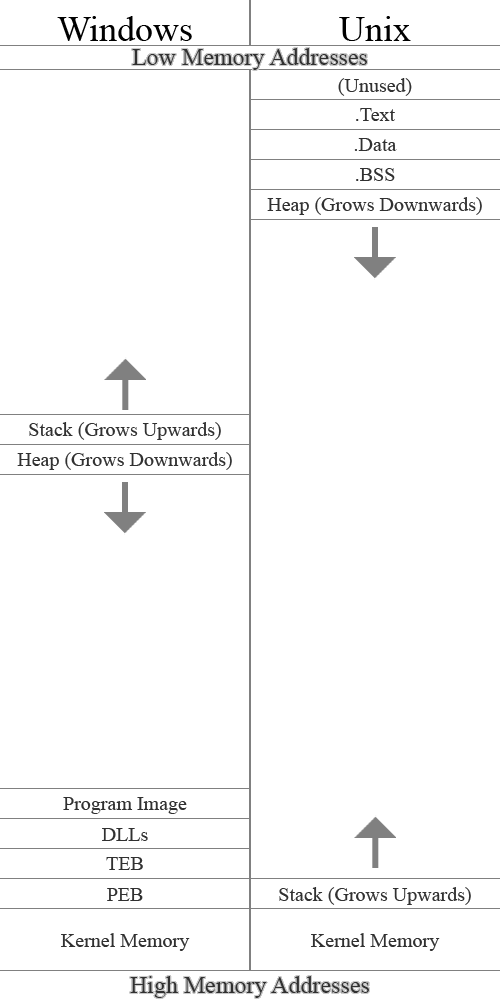
<style>
.page{position:relative;width:500px;height:1000px;background:#ffffff}
.page>*{position:absolute;margin:0}
.t1{font:36px "TimesNewRomanPSMT";color:#000000}
.t2{font:24px "TimesNewRomanPSMT";color:#313131}
.t3{font:20px "TimesNewRomanPSMT";color:#313131}
</style>
<div class="page">
<p class="t1" style="left:57px;top:16px;width:135px;height:25px">Windows</p>
<p class="t1" style="left:339px;top:16px;width:72px;height:25px">Unix</p>
<p class="t2" style="left:132px;top:48px;width:235px;height:22px">Low Memory Addresses</p>
<p class="t3" style="left:338px;top:78px;width:74px;height:18px">(Unused)</p>
<p class="t3" style="left:356px;top:108px;width:39px;height:13px">.Text</p>
<p class="t3" style="left:354px;top:138px;width:43px;height:13px">.Data</p>
<p class="t3" style="left:356px;top:168px;width:39px;height:13px">.BSS</p>
<p class="t3" style="left:267px;top:197px;width:215px;height:18px">Heap (Grows Downwards)</p>
<p class="t3" style="left:29px;top:422px;width:192px;height:18px">Stack (Grows Upwards)</p>
<p class="t3" style="left:17px;top:452px;width:215px;height:18px">Heap (Grows Downwards)</p>
<p class="t3" style="left:63px;top:797px;width:124px;height:17px">Program Image</p>
<p class="t3" style="left:102px;top:828px;width:46px;height:13px">DLLs</p>
<p class="t3" style="left:106px;top:857px;width:37px;height:13px">TEB</p>
<p class="t3" style="left:107px;top:888px;width:36px;height:13px">PEB</p>
<p class="t3" style="left:279px;top:887px;width:192px;height:18px">Stack (Grows Upwards)</p>
<p class="t3" style="left:61px;top:933px;width:129px;height:18px">Kernel Memory</p>
<p class="t3" style="left:311px;top:933px;width:129px;height:18px">Kernel Memory</p>
<p class="t2" style="left:130px;top:976px;width:239px;height:22px">High Memory Addresses</p>
</div>
